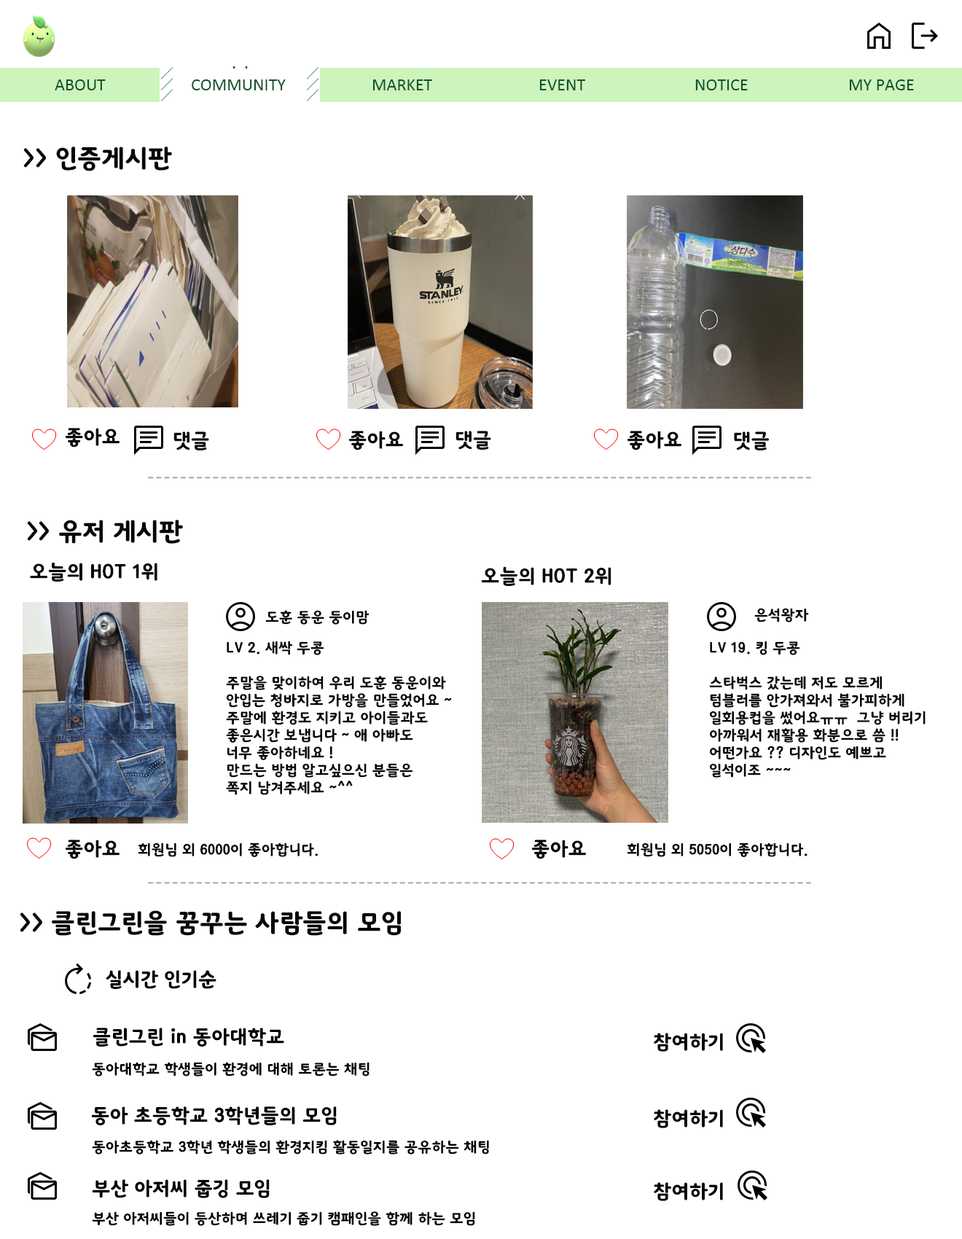
<style>
.page{position:relative;width:962px;height:1239px;background:#ffffff}
.page>*{position:absolute;margin:0}
.t1{font:17.5px "Calibri";color:#11532e}
.t2{font:17.5px "Calibri";color:#12522e}
.t3{font:25.5px "KoreanSST-R";color:#070707}
.t4{font:19.7px "KoreanSST-R";color:#070707}
.t5{font:13.1px "KoreanSST-R";color:#acacac}
.t6{font:14.6px "KoreanSST-R";color:#070707}
.t7{font:19.7px "KoreanSST-R";color:#000000}
.t8{font:14.6px "KoreanSST-R";color:#000000}
</style>
<div class="page">
<p class="t1" style="left:55px;top:79px;width:51px;height:11px">ABOUT</p>
<p class="t2" style="left:192px;top:79px;width:94px;height:11px">COMMUNITY</p>
<p class="t2" style="left:373px;top:79px;width:59px;height:11px">MARKET</p>
<p class="t2" style="left:539px;top:79px;width:46px;height:11px">EVENT</p>
<p class="t2" style="left:695px;top:79px;width:53px;height:11px">NOTICE</p>
<p class="t2" style="left:849px;top:79px;width:65px;height:11px">MY PAGE</p>
<p class="t3" style="left:23px;top:147px;width:149px;height:24px">&gt;&gt; 인증게시판</p>
<p class="t4" style="left:65px;top:428px;width:55px;height:20px">좋아요</p>
<p class="t4" style="left:173px;top:432px;width:36px;height:18px">댓글</p>
<p class="t4" style="left:348px;top:431px;width:55px;height:19px">좋아요</p>
<p class="t4" style="left:456px;top:431px;width:35px;height:19px">댓글</p>
<p class="t4" style="left:627px;top:431px;width:55px;height:19px">좋아요</p>
<p class="t4" style="left:734px;top:432px;width:35px;height:18px">댓글</p>
<p class="t5" style="left:148px;top:477px;width:663px;height:2px">----------------------------------------------------------------------------------</p>
<p class="t3" style="left:27px;top:520px;width:156px;height:24px">&gt;&gt; 유저 게시판</p>
<p class="t4" style="left:30px;top:562px;width:127px;height:20px">오늘의 HOT 1위</p>
<p class="t4" style="left:481px;top:566px;width:131px;height:20px">오늘의 HOT 2위</p>
<p class="t6" style="left:265px;top:610px;width:105px;height:15px">도훈 동운 둥이맘</p>
<p class="t6" style="left:754px;top:608px;width:55px;height:15px">은석왕자</p>
<p class="t6" style="left:226px;top:641px;width:226px;height:154px">LV 2. 새싹 두콩<br><br>주말을 맞이하여 우리 도훈 동운이와<br>안입는 청바지로 가방을 만들었어요 ~<br>주말에 환경도 지키고 아이들과도<br>좋은시간 보냅니다 ~ 애 아빠도 <br>너무 좋아하네요 !<br>만드는 방법 알고싶으신 분들은<br>쪽지 남겨주세요 ~^^</p>
<p class="t6" style="left:709px;top:641px;width:217px;height:137px">LV 19. 킹 두콩<br><br>스타벅스 갔는데 저도 모르게<br>텀블러를 안가져와서 불가피하게<br>일회용컵을 썼어요ㅠㅠ  그냥 버리기 <br>아까워서 재활용 화분으로 씀 !!<br>어떤가요 ?? 디자인도 예쁘고 <br>일석이조 ~~~</p>
<p class="t4" style="left:65px;top:840px;width:55px;height:19px">좋아요</p>
<p class="t6" style="left:138px;top:843px;width:180px;height:14px">회원님 외 6000이 좋아합니다.</p>
<p class="t4" style="left:531px;top:840px;width:55px;height:19px">좋아요</p>
<p class="t6" style="left:627px;top:843px;width:181px;height:14px">회원님 외 5050이 좋아합니다.</p>
<p class="t5" style="left:148px;top:882px;width:663px;height:2px">----------------------------------------------------------------------------------</p>
<p class="t3" style="left:20px;top:910px;width:381px;height:26px">&gt;&gt; 클린그린을 꿈꾸는 사람들의 모임</p>
<p class="t7" style="left:106px;top:970px;width:111px;height:19px">실시간 인기순</p>
<p class="t7" style="left:93px;top:1028px;width:191px;height:19px">클린그린 in 동아대학교</p>
<p class="t4" style="left:654px;top:1033px;width:69px;height:19px">참여하기</p>
<p class="t8" style="left:92px;top:1062px;width:278px;height:15px">동아대학교 학생들이 환경에 대해 토론는 채팅</p>
<p class="t7" style="left:91px;top:1107px;width:246px;height:19px">동아 초등학교 3학년들의 모임</p>
<p class="t4" style="left:654px;top:1109px;width:69px;height:19px">참여하기</p>
<p class="t8" style="left:92px;top:1140px;width:397px;height:15px">동아초등학교 3학년 학생들의 환경지킴 활동일지를 공유하는 채팅</p>
<p class="t7" style="left:92px;top:1179px;width:178px;height:19px">부산 아저씨 줍깅 모임</p>
<p class="t4" style="left:654px;top:1182px;width:69px;height:19px">참여하기</p>
<p class="t8" style="left:92px;top:1212px;width:383px;height:14px">부산 아저씨들이 등산하며 쓰레기 줍기 캠패인을 함께 하는 모임</p>
</div>
